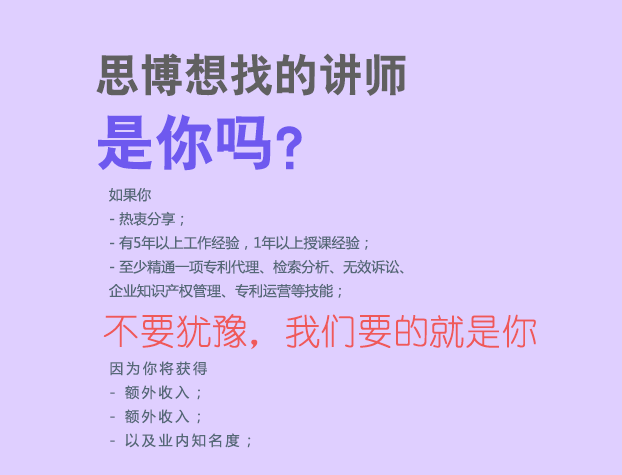
<style>
.page{position:relative;width:622px;height:475px;background:#dfcfff}
.page>*{position:absolute;margin:0}
.t1{font:44.9px/60px "HYb2gj";letter-spacing:0.01em;color:#606060}
.t2{font:60px/60px "HYb2gj";letter-spacing:0.01em;color:#6e59ef}
.t3{font:14px/24px "MicrosoftYaHei";color:#556877}
.t4{font:35.9px "YouYuan";color:#ef5959}
.t5{font:14px/24px "MicrosoftYaHei";letter-spacing:0.195em;color:#556877}
</style>
<div class="page">
<p class="t1" style="left:96px;top:53px;width:310px;height:118px;text-align:justify">思博想找的讲师<br><span class="t2">是你吗？</span></p>
<p class="t3" style="left:109px;top:188px;width:295px;height:110px;text-align:justify">如果你<br>- 热衷分享；<br>- 有5年以上工作经验，1年以上授课经验；<br>- 至少精通一项专利代理、检索分析、无效诉讼、<br>企业知识产权管理、专利运营等技能；</p>
<p class="t4" style="left:103px;top:313px;width:433px;height:37px">不要犹豫，我们要的就是你</p>
<p class="t5" style="left:110px;top:361px;width:141px;height:87px;text-align:justify">因为你将获得<br>- 额外收入；<br>- 额外收入；<br>- 以及业内知名度；</p>
</div>
